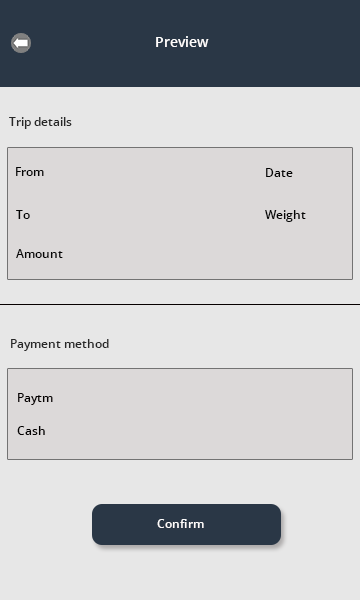
<style>
.page{position:relative;width:360px;height:600px;background:#e7e7e7}
.page>*{position:absolute;margin:0}
.t1{font:14px "OpenSans-Semibold";color:#fffdfd}
.t2{font:12px "OpenSans-Semibold";color:#282828}
.t3{font:12px "OpenSans-Semibold";color:#060606}
.t4{font:12px "OpenSans-Semibold";color:#050202}
.t5{font:12px "OpenSans-Semibold";color:#020101}
.t6{font:12px "OpenSans-Semibold";color:#fefcfc}
</style>
<div class="page">
<p class="t1" style="left:156px;top:36px;width:53px;height:11px">Preview</p>
<p class="t2" style="left:9px;top:117px;width:63px;height:12px">Trip details</p>
<p class="t3" style="left:16px;top:167px;width:28px;height:9px">From</p>
<p class="t3" style="left:266px;top:168px;width:27px;height:9px">Date</p>
<p class="t3" style="left:16px;top:210px;width:14px;height:9px">To</p>
<p class="t3" style="left:265px;top:210px;width:41px;height:12px">Weight</p>
<p class="t3" style="left:16px;top:249px;width:47px;height:9px">Amount</p>
<p class="t2" style="left:11px;top:339px;width:98px;height:12px">Payment method</p>
<p class="t4" style="left:18px;top:393px;width:35px;height:12px">Paytm</p>
<p class="t5" style="left:17px;top:426px;width:28px;height:9px">Cash</p>
<p class="t6" style="left:157px;top:519px;width:47px;height:9px">Confirm</p>
</div>
